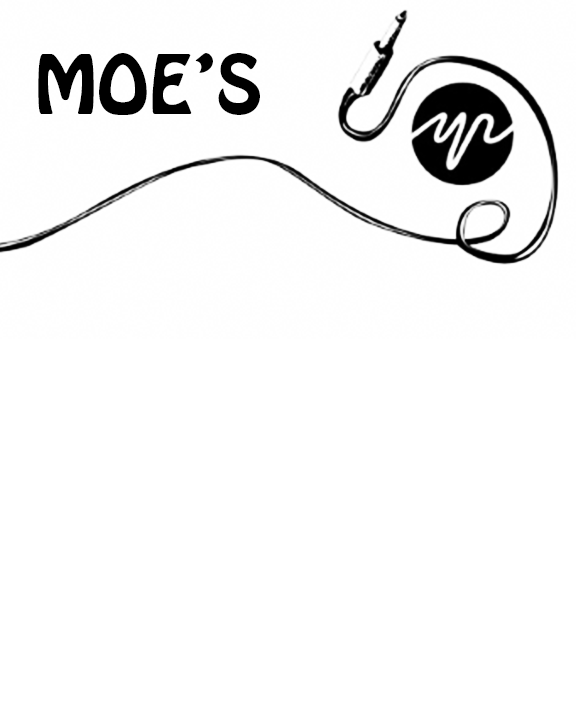
<style>
.page{position:relative;width:576px;height:720px;background:#ffffff}
.page>*{position:absolute;margin:0}
.t1{font:72px "HoboStd";color:#000000}
</style>
<div class="page">
<p class="t1" style="left:38px;top:53px;width:222px;height:62px">MOE’S</p>
</div>
